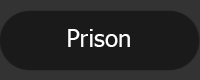
<style>
.page{position:relative;width:200px;height:80px;background:#1a1a1a}
.page>*{position:absolute;margin:0}
.t1{font:24px "Tahoma";color:#ffffff}
</style>
<div class="page">
<p class="t1" style="left:68px;top:29px;width:62px;height:18px">Prison</p>
</div>
